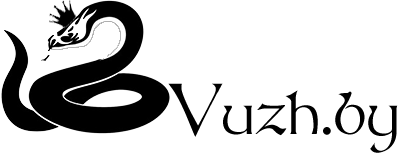
<style>
.page{position:relative;width:400px;height:155px;background:#ffffff}
.page>*{position:absolute;margin:0}
.t1{font:72px "Stonehenge";color:#000000}
</style>
<div class="page">
<p class="t1" style="left:168px;top:83px;width:230px;height:70px">Vuzh.by</p>
</div>
